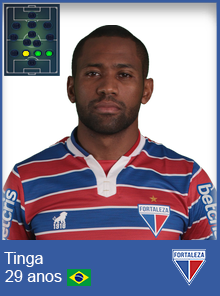
<style>
.page{position:relative;width:220px;height:296px}
.page>*{position:absolute;margin:0}
.t1{font:16px "ArialMT";color:#ffffff}
</style>
<div class="page">
<p class="t1" style="left:4px;top:252px;width:39px;height:15px">Tinga</p>
<p class="t1" style="left:5px;top:270px;width:57px;height:12px">29 anos</p>
</div>
